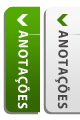
<style>
.page{position:relative;width:80px;height:120px}
.page>*{position:absolute;margin:0}
.t1{font:13.8px "MyriadPro-Bold";letter-spacing:0.05em;color:#ffffff;scale:0.94 1}
.t2{font:13.8px "MyriadPro-Bold";letter-spacing:0.05em;color:#4b4747;scale:0.94 1}
</style>
<div class="page">
<p class="t1" style="left:15px;top:30px;width:15px;height:79px;rotate:91deg">ANOTAÇÕES</p>
<p class="t2" style="left:55px;top:30px;width:15px;height:79px;rotate:91deg">ANOTAÇÕES</p>
</div>
